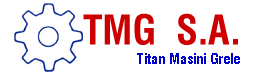
<style>
.page{position:relative;width:266px;height:77px;background:#ffffff}
.page>*{position:absolute;margin:0}
.t1{font:35px "Swiss721BT-BoldCondensed";color:#cc0000}
.t2{font:40px "Swiss721BT-BoldCondensed";color:#cc0000}
.t3{font:14px "Swiss721BT-BoldCondensed";color:#0000cc}
</style>
<div class="page">
<p class="t1" style="left:83px;top:13px;width:155px;height:32px"><span class="t2">TMG  S.A.<br> </span>MASINI MASINI GRELE</p>
<p class="t3" style="left:137px;top:53px;width:103px;height:11px">Titan Masini Grele</p>
</div>
